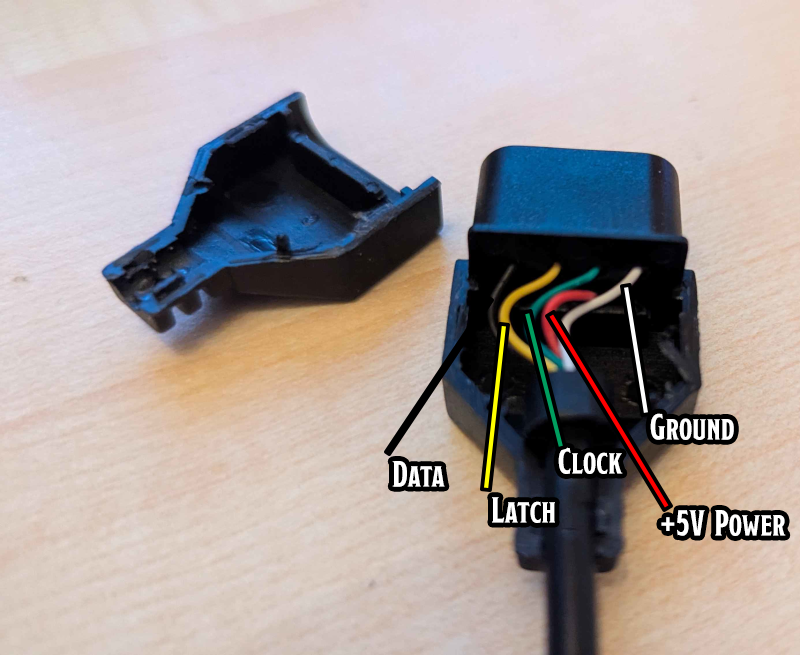
<style>
.page{position:relative;width:800px;height:655px}
.page>*{position:absolute;margin:0}
.t1{font:36px "ModestoCondensed-Bold";color:#ffffff}
</style>
<div class="page">
<p class="t1" style="left:650px;top:413px;width:84px;height:27px">Ground</p>
<p class="t1" style="left:558px;top:447px;width:65px;height:27px">Clock</p>
<p class="t1" style="left:392px;top:461px;width:53px;height:26px">Data</p>
<p class="t1" style="left:492px;top:497px;width:63px;height:26px">Latch</p>
<p class="t1" style="left:661px;top:510px;width:125px;height:26px">+5V  Power</p>
</div>
